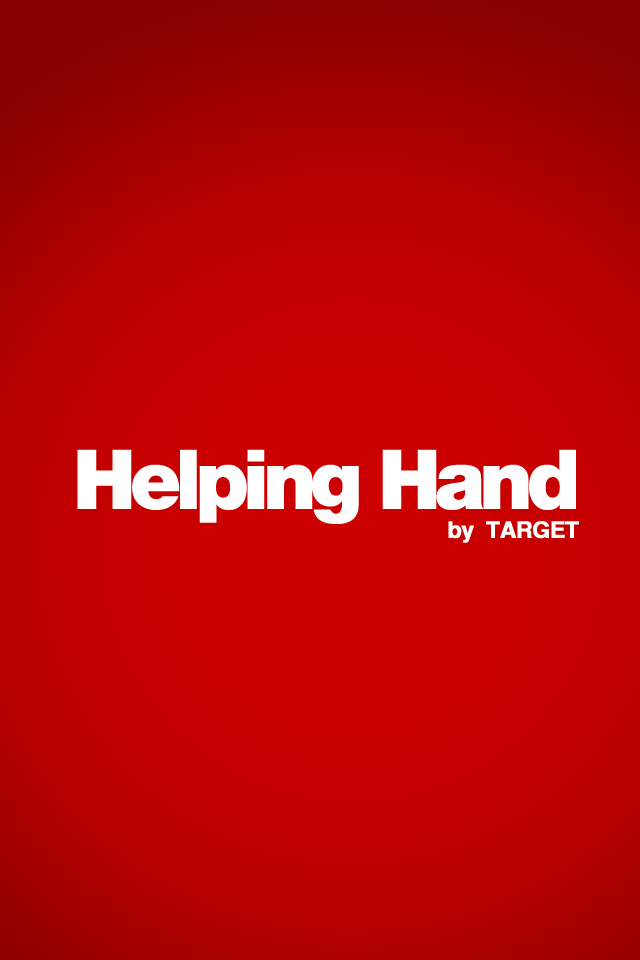
<style>
.page{position:relative;width:640px;height:960px}
.page>*{position:absolute;margin:0}
.t1{font:82.6px "HelveticaNeue-Black";letter-spacing:-0.1em;color:#ffffff;font-weight:bold}
.t2{font:23px "Helvetica_cyr-Bold";letter-spacing:-0.04em;color:#ffffff;font-weight:bold}
</style>
<div class="page">
<p class="t1" style="left:77px;top:449px;width:499px;height:75px">Helping Hand</p>
<p class="t2" style="left:448px;top:521px;width:131px;height:22px">by  TARGET</p>
</div>
